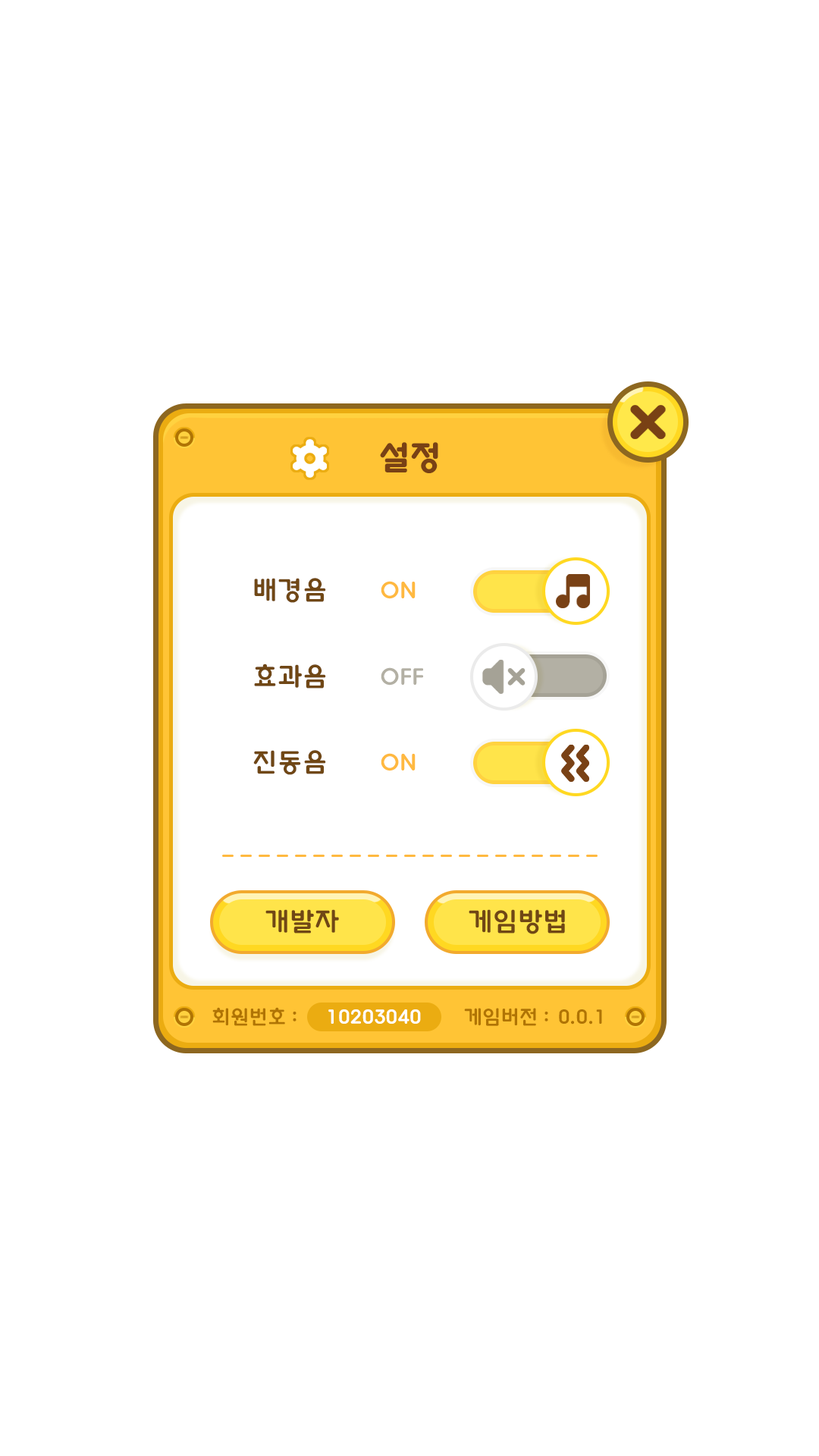
<style>
.page{position:relative;width:819px;height:1456px;background:#ffffff}
.page>*{position:absolute;margin:0}
.t1{font:31.6px "TypoDodamB";color:#794115}
.t2{font:25.3px "TypoDodamM";color:#704715}
.t3{font:22.1px "TypoDodamM";color:#ffb940}
.t4{font:22.1px "TypoDodamM";color:#b3b0a4}
.t5{font:19px "TypoDodamM";color:#b07404}
.t6{font:19px "TypoDodamM";color:#ffffff}
</style>
<div class="page">
<p class="t1" style="left:380px;top:442px;width:58px;height:31px">설정</p>
<p class="t2" style="left:254px;top:578px;width:72px;height:25px">배경음</p>
<p class="t3" style="left:381px;top:581px;width:35px;height:18px">ON</p>
<p class="t2" style="left:254px;top:664px;width:72px;height:25px">효과음</p>
<p class="t4" style="left:381px;top:667px;width:42px;height:19px">OFF</p>
<p class="t2" style="left:253px;top:750px;width:73px;height:25px">진동음</p>
<p class="t3" style="left:381px;top:753px;width:35px;height:18px">ON</p>
<p class="t2" style="left:265px;top:909px;width:74px;height:24px">개발자</p>
<p class="t2" style="left:469px;top:909px;width:96px;height:25px">게임방법</p>
<p class="t5" style="left:212px;top:1007px;width:85px;height:19px">회원번호 :</p>
<p class="t6" style="left:328px;top:1009px;width:93px;height:15px">10203040</p>
<p class="t5" style="left:464px;top:1008px;width:84px;height:18px">게임버전 :</p>
<p class="t5" style="left:559px;top:1009px;width:43px;height:15px">0.0.1</p>
</div>
